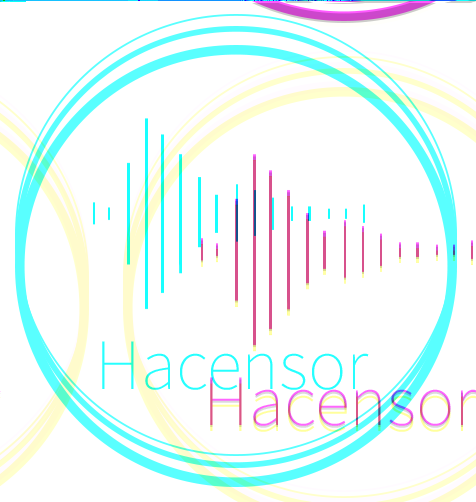
<style>
.page{position:relative;width:476px;height:502px;background:#ffffff}
.page>*{position:absolute;margin:0}
.t1{font:72px "SourceSansPro-ExtraLight"}
</style>
<div class="page">
<p class="t1" style="left:102px;top:340px;width:267px;height:49px">Hacensor</p>
</div>
